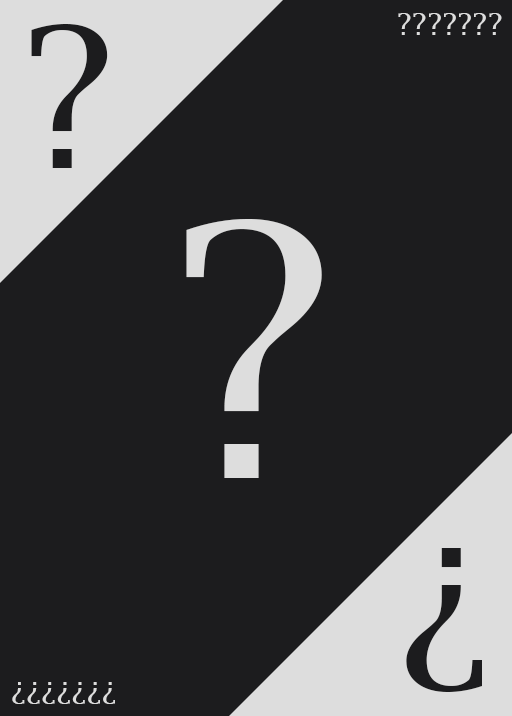
<style>
.page{position:relative;width:512px;height:716px;background:#1c1c1e}
.page>*{position:absolute;margin:0}
.t1{font:30px "LucidaFax";color:#dddddd}
.t2{font:194.9px "LucidaBright";color:#1c1c1e}
.t3{font:350px "LucidaBright";color:#dddddd}
</style>
<div class="page">
<p class="t1" style="left:398px;top:13px;width:104px;height:22px">???????</p>
<p class="t2" style="left:31px;top:24px;width:77px;height:144px">?</p>
<p class="t3" style="left:186px;top:219px;width:136px;height:259px">?</p>
<p class="t2" style="left:406px;top:548px;width:76px;height:144px;rotate:180deg">?</p>
<p class="t1" style="left:12px;top:682px;width:103px;height:22px;rotate:180deg">???????</p>
</div>
